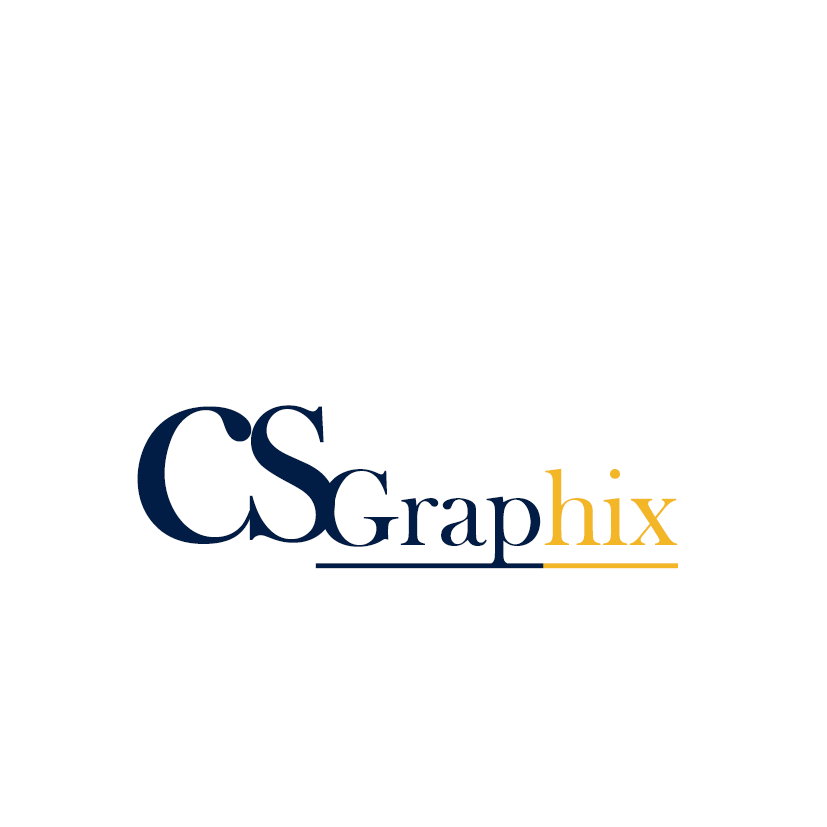
<style>
.page{position:relative;width:827px;height:827px;background:#ffffff}
.page>*{position:absolute;margin:0}
.t1{font:318.6px "BaskOldFace";color:#011d45}
.t2{font:111px "BaskOldFace";color:#011d45;text-decoration:underline}
.t3{font:111px "BaskOldFace";color:#f2b627;text-decoration:underline}
</style>
<div class="page">
<p class="t1" style="left:137px;top:406px;width:116px;height:138px;rotate:-1deg">c</p>
<p class="t1" style="left:249px;top:405px;width:86px;height:138px">s</p>
<p class="t2" style="left:315px;top:468px;width:363px;height:101px">Grap<span class="t3">hix</span></p>
</div>
